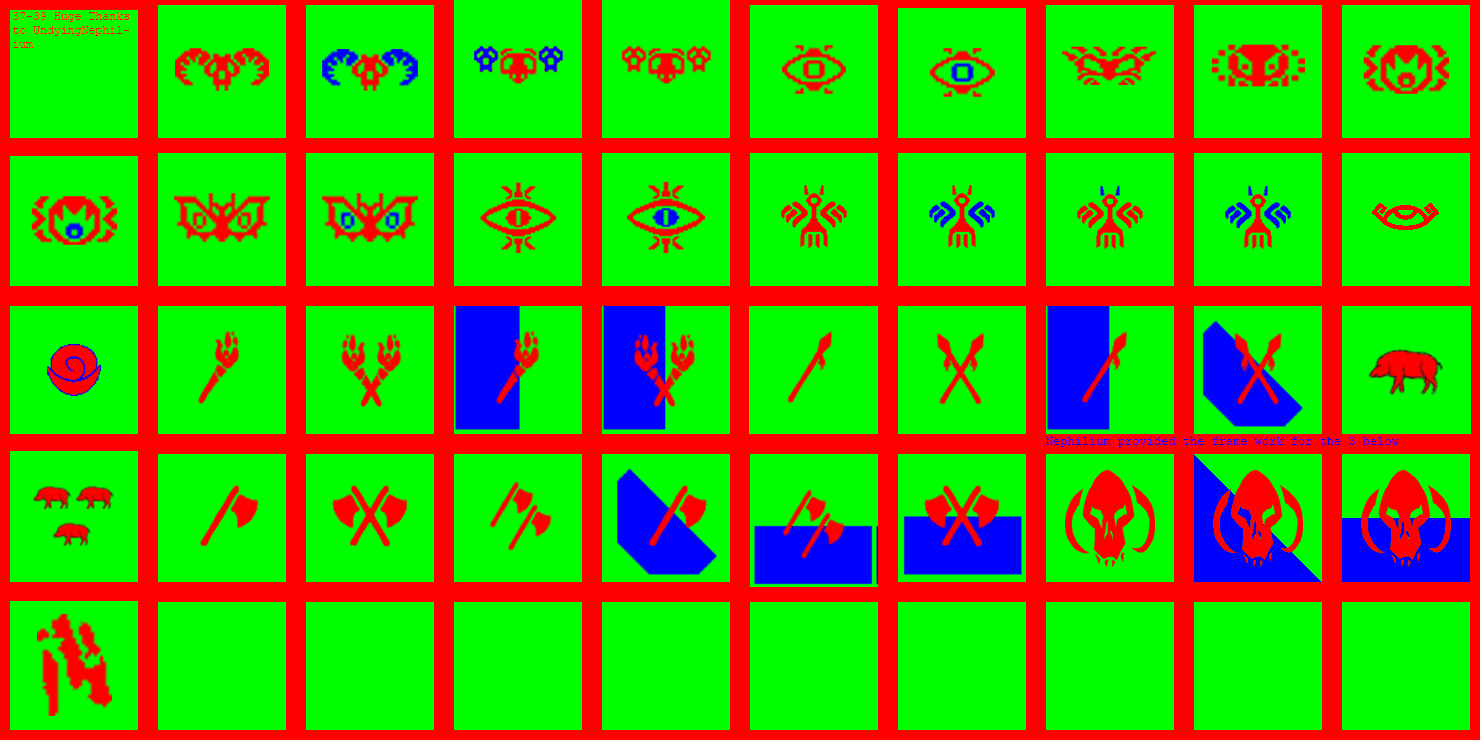
<style>
.page{position:relative;width:1480px;height:740px;background:#00ff00}
.page>*{position:absolute;margin:0}
.t1{font:11.5px "CourierNewPSMT";color:#ff0000}
.t2{font:12px "CourierNewPSMT";color:#0000ff}
</style>
<div class="page">
<p class="t1" style="left:13px;top:12px;width:117px;height:36px">37-39 Huge Thanks to UndyingNephilium</p>
<p class="t2" style="left:1046px;top:437px;width:353px;height:10px">Nephilium provided the frame work for the 3 below</p>
</div>
